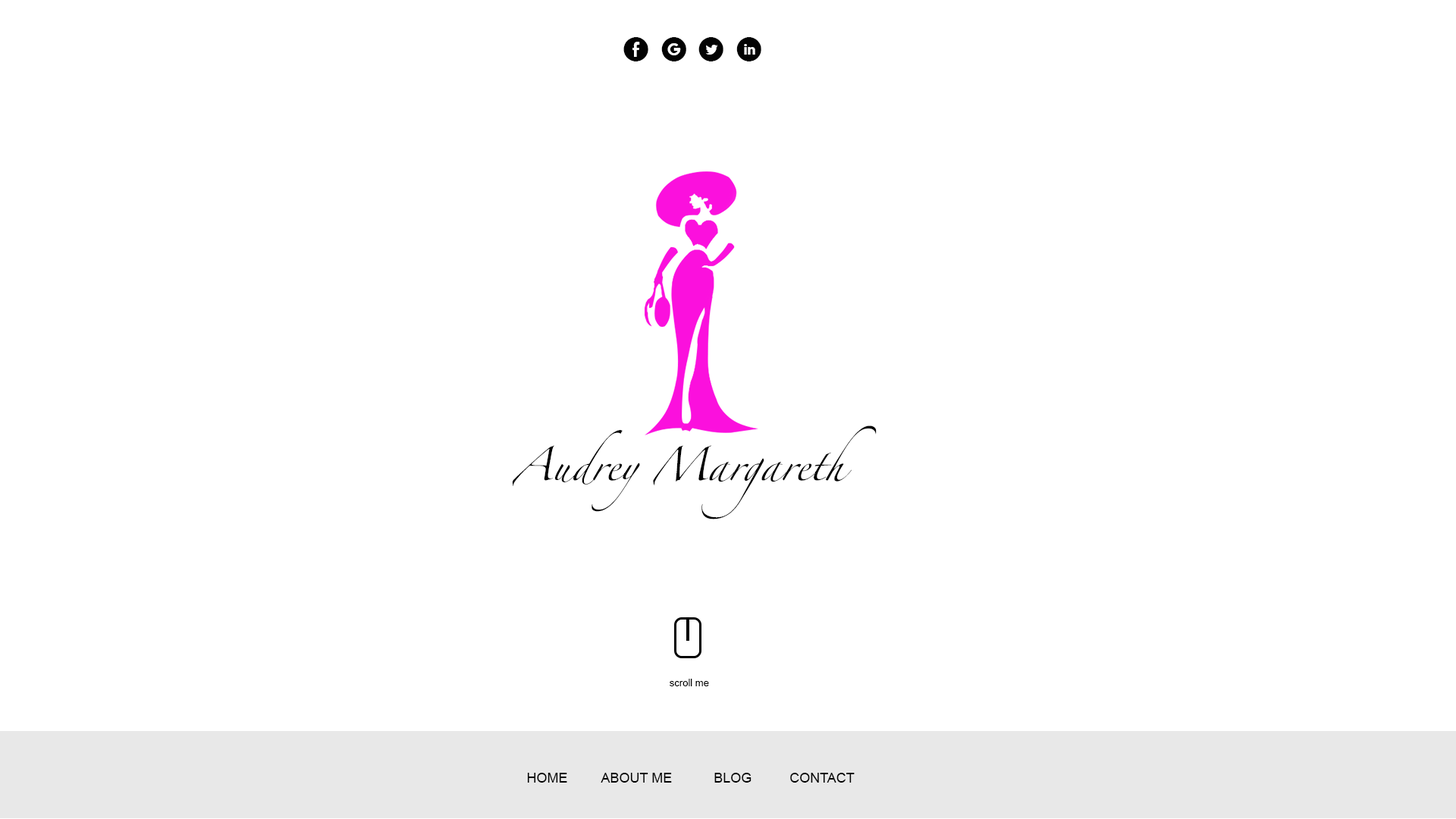
<style>
.page{position:relative;width:1456px;height:819px;background:#ffffff}
.page>*{position:absolute;margin:0}
.t1{font:24.3px "SocialMediaCircled";color:#030303}
.t2{font:29.6px "Zapfino";color:#030303}
.t3{font:9.9px "ArialMT";color:#030303}
.t4{font:13.6px "ArialMT";color:#030303}
</style>
<div class="page">
<p class="t1" style="left:623px;top:37px;width:138px;height:24px">E  q  D  C</p>
<p class="t2" style="left:512px;top:425px;width:365px;height:94px">Audrey Margareth</p>
<p class="t3" style="left:670px;top:679px;width:39px;height:7px">scroll me</p>
<p class="t4" style="left:527px;top:773px;width:328px;height:10px">HOME         ABOUT ME           BLOG          CONTACT</p>
</div>
